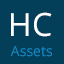
<style>
.page{position:relative;width:64px;height:64px;background:#043f59}
.page>*{position:absolute;margin:0}
.t1{font:32px "OpenSans";color:#ffffff}
.t2{font:14px "OpenSans";color:#158bc8}
</style>
<div class="page">
<p class="t1" style="left:11px;top:12px;width:41px;height:25px">HC</p>
<p class="t2" style="left:10px;top:46px;width:42px;height:11px">Assets</p>
</div>
